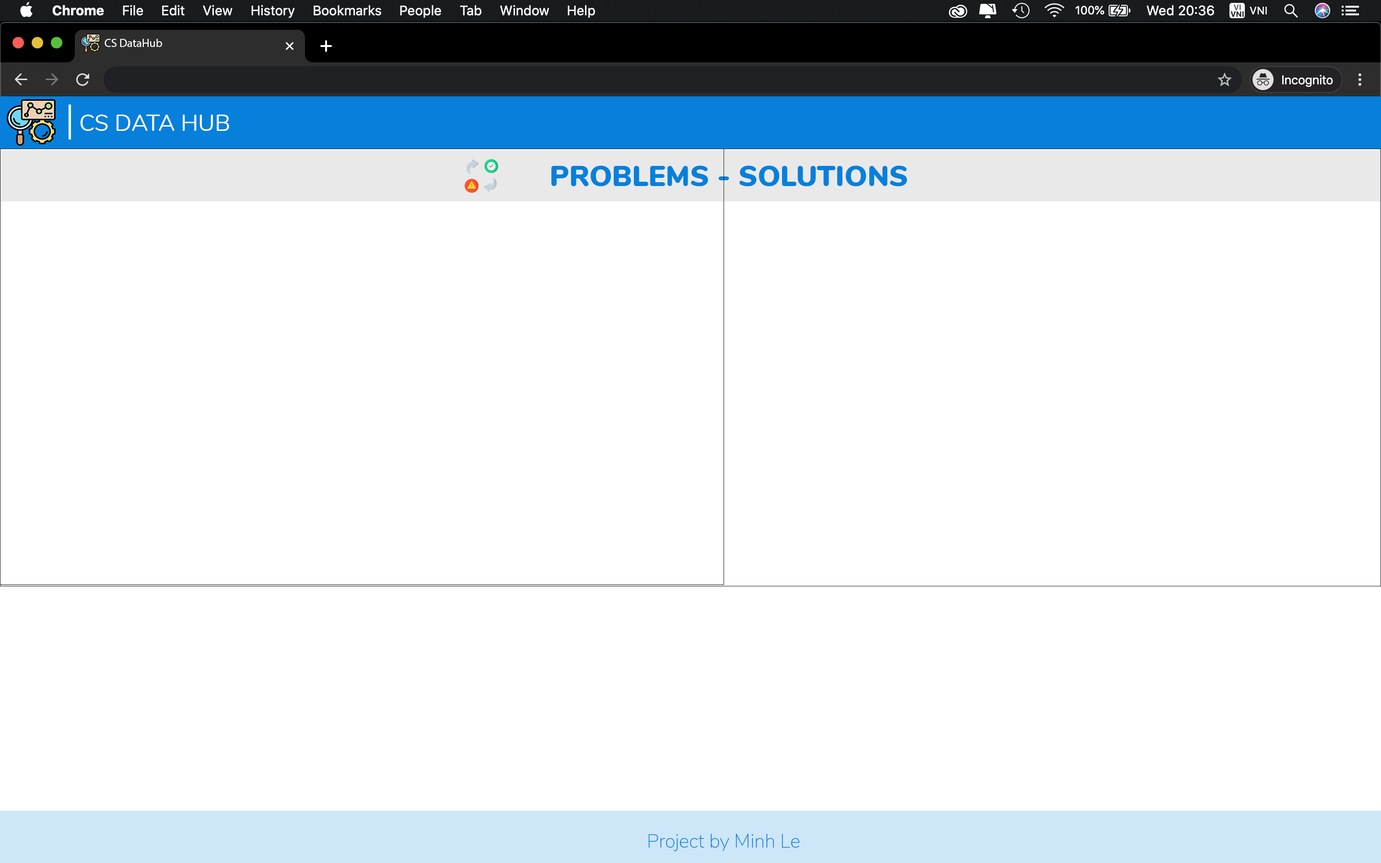
<style>
.page{position:relative;width:1381px;height:863px;background:#ffffff}
.page>*{position:absolute;margin:0}
.t1{font:11.5px "MyriadPro-Regular";color:#fffefe}
.t2{font:23px "Nunito-Regular";color:#fffefe}
.t3{font:28.8px "Nunito-Black";color:#0680db}
.t4{font:19.2px "Nunito-ExtraLight";color:#0680db}
</style>
<div class="page">
<p class="t1" style="left:105px;top:39px;width:57px;height:8px">CS DataHub</p>
<p class="t2" style="left:80px;top:115px;width:149px;height:16px">CS DATA HUB</p>
<p class="t3" style="left:551px;top:165px;width:356px;height:22px">PROBLEMS - SOLUTIONS</p>
<p class="t4" style="left:648px;top:834px;width:152px;height:17px">Project by Minh Le</p>
</div>
